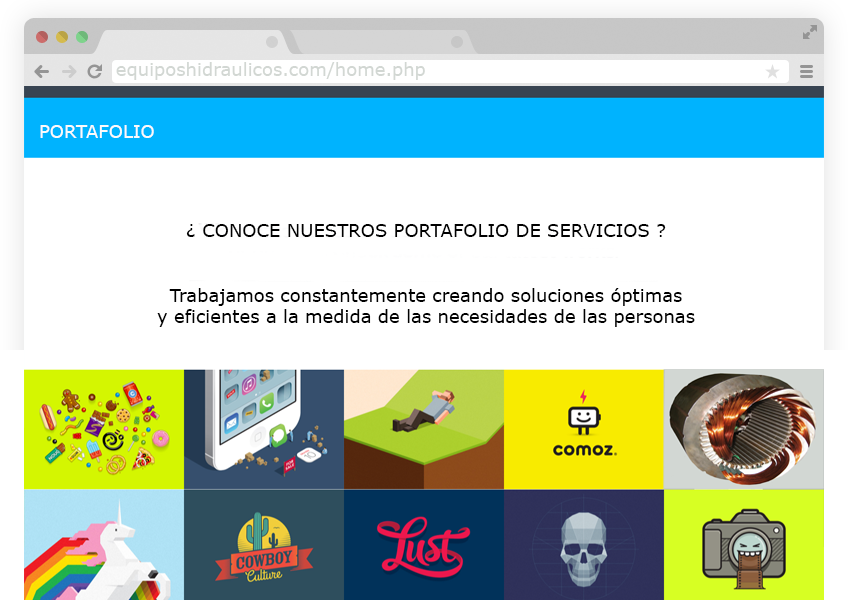
<style>
.page{position:relative;width:848px;height:600px;background:#ffffff}
.page>*{position:absolute;margin:0}
.t1{font:18px "Verdana";color:#d2d7d3}
.t2{font:18px "Verdana";color:#fcfafa}
.t3{font:18px "Verdana";color:#000000}
</style>
<div class="page">
<p class="t1" style="left:116px;top:62px;width:309px;height:18px">equiposhidraulicos.com/home.php</p>
<p class="t2" style="left:40px;top:125px;width:114px;height:13px">PORTAFOLIO</p>
<p class="t3" style="left:157px;top:224px;width:538px;height:103px;text-align:center">¿ CONOCE NUESTROS PORTAFOLIO DE SERVICIOS ?<br><br><br>Trabajamos constantemente creando soluciones óptimas<br>y eficientes a la medida de las necesidades de las personas</p>
</div>
